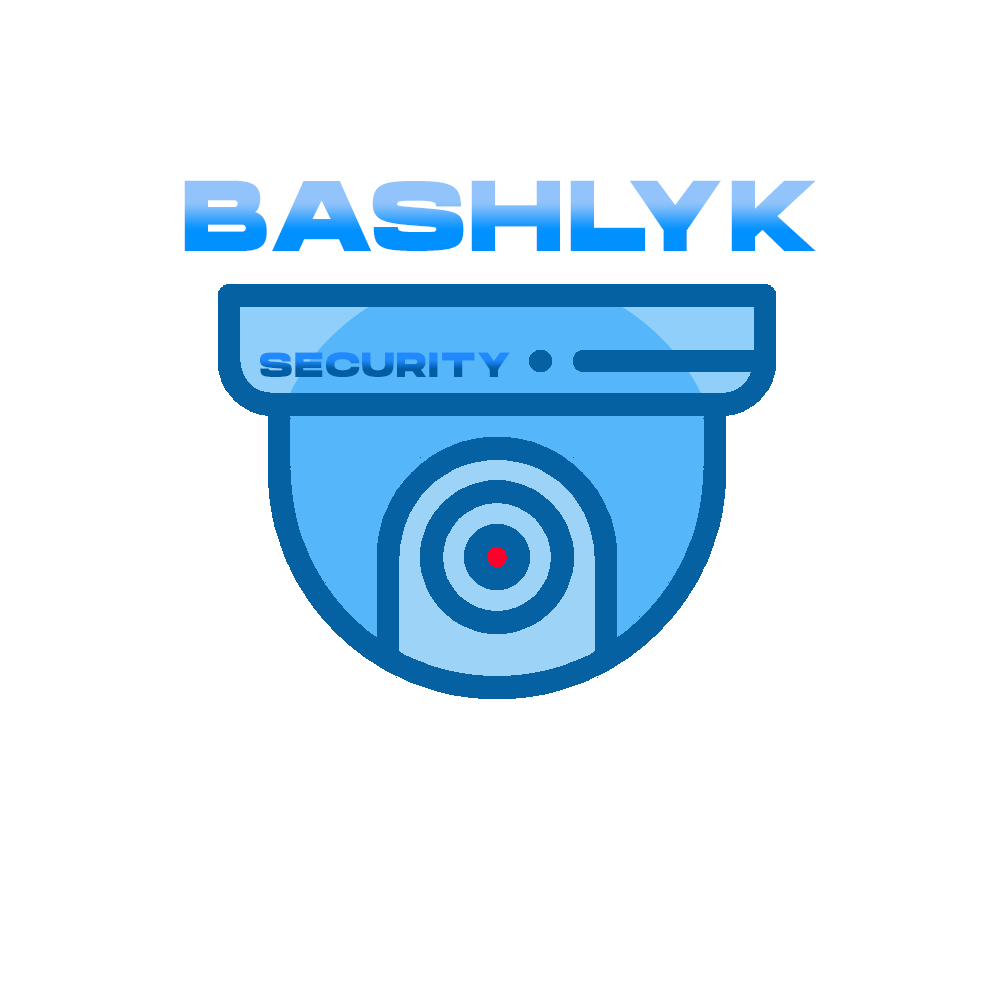
<style>
.page{position:relative;width:1000px;height:1000px;background:#ffffff}
.page>*{position:absolute;margin:0}
.t1{font:100px "HansonBold";letter-spacing:0.05em;text-transform:uppercase}
.t2{font:35px "HansonBold";letter-spacing:0.05em;text-transform:uppercase}
</style>
<div class="page">
<p class="t1" style="left:184px;top:180px;width:632px;height:71px">bashlyk</p>
<p class="t2" style="left:260px;top:352px;width:250px;height:25px">security</p>
</div>
